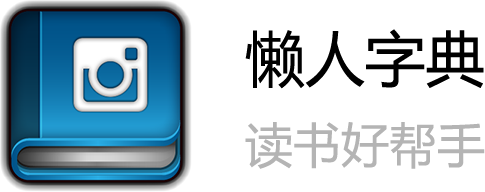
<style>
.page{position:relative;width:485px;height:192px;background:#ffffff}
.page>*{position:absolute;margin:0}
.t1{font:60px "MicrosoftYaHei";color:#000000}
.t2{font:48px "MicrosoftYaHei";color:#b4b4b4}
</style>
<div class="page">
<p class="t1" style="left:245px;top:29px;width:239px;height:60px">懒人字典</p>
<p class="t2" style="left:245px;top:122px;width:240px;height:47px">读书好帮手</p>
</div>
